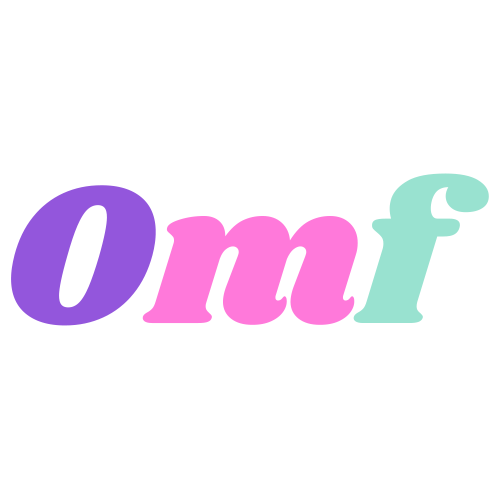
<style>
.page{position:relative;width:500px;height:500px;background:#ffffff}
.page>*{position:absolute;margin:0}
.t1{font:202.2px "Shrikhand-Regular";color:#9356dc}
.t2{font:202.2px "Shrikhand-Regular";color:#ff79da}
.t3{font:202.2px "Shrikhand-Regular";color:#99e2d0}
</style>
<div class="page">
<p class="t1" style="left:11px;top:173px;width:478px;height:153px">O<span class="t2">m</span><span class="t3">f</span></p>
</div>
